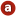
<style>
.page{position:relative;width:16px;height:16px;background:#ffffff}
.page>*{position:absolute;margin:0}
.t1{font:12px "Menlo-Bold";color:#ffffff}
</style>
<div class="page">
<p class="t1" style="left:4px;top:4px;width:7px;height:8px">a</p>
</div>
